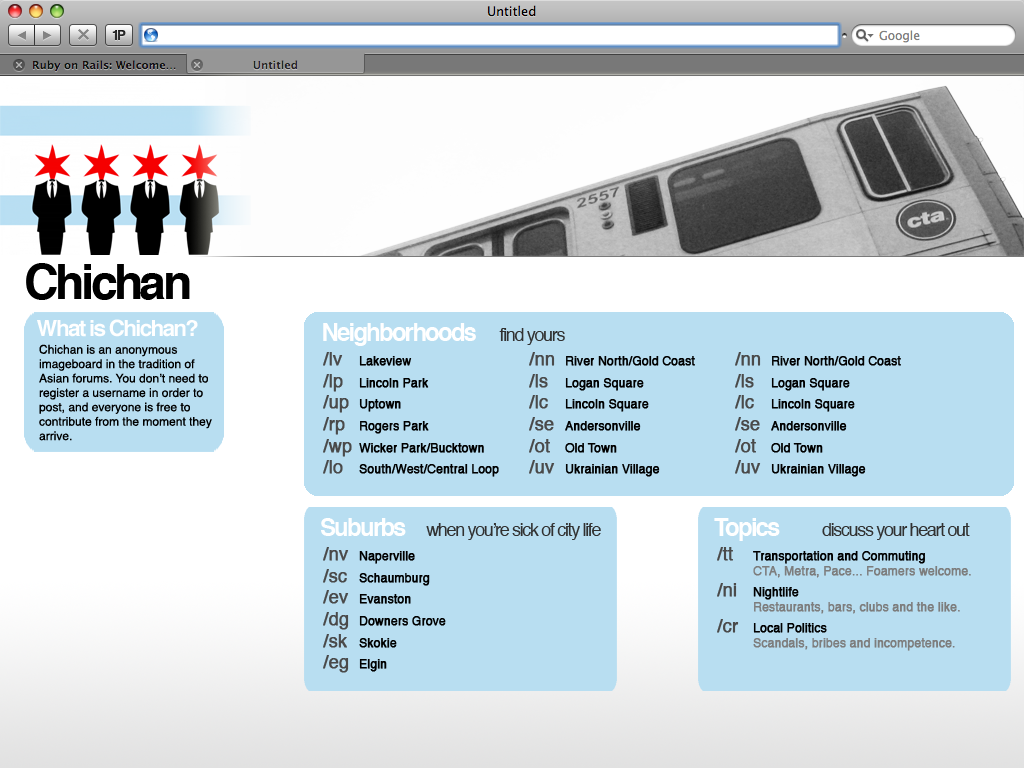
<style>
.page{position:relative;width:1024px;height:768px;background:#b8def1}
.page>*{position:absolute;margin:0}
.t1{font:48px "Helvetica-Bold";letter-spacing:-0.075em;color:#000000}
.t2{font:22.3px "Helvetica-Bold";letter-spacing:-0.075em;color:#ffffff}
.t3{font:24px "Helvetica-Bold";letter-spacing:-0.075em;color:#ffffff}
.t4{font:18px "Helvetica";letter-spacing:-0.075em;color:#313131}
.t5{font:12px "Helvetica";color:#000000}
.t6{font:12px "Helvetica";letter-spacing:-0.005em;color:#000000;font-weight:bold}
.t7{font:18px "Helvetica";letter-spacing:-0.005em;color:#4a4a4a;font-weight:bold}
.t8{font:12px "Helvetica";letter-spacing:-0.005em;color:#7d7d7d;font-weight:bold}
</style>
<div class="page">
<p class="t1" style="left:26px;top:263px;width:164px;height:37px">Chichan</p>
<p class="t2" style="left:37px;top:319px;width:161px;height:18px">What is Chichan?</p>
<p class="t3" style="left:323px;top:323px;width:242px;height:23px">Neighborhoods <span class="t4">find yours</span></p>
<p class="t5" style="left:39px;top:344px;width:173px;height:97px">Chichan is an anonymous imageboard in the tradition of Asian forums. You don’t need to register a username in order to post, and everyone is free to contribute from the moment they arrive.</p>
<p class="t6" style="left:323px;top:352px;width:176px;height:125px"><span class="t7">/lv </span>Lakeview<br><span class="t7">/lp </span>Lincoln Park<br><span class="t7">/up </span>Uptown<br><span class="t7">/rp </span>Rogers Park<br><span class="t7">/wp </span>Wicker Park/Bucktown<br><span class="t7">/lo </span>South/West/Central Loop</p>
<p class="t6" style="left:529px;top:352px;width:166px;height:125px"><span class="t7">/nn </span>River North/Gold Coast<br><span class="t7">/ls </span>Logan Square<br><span class="t7">/lc </span>Lincoln Square<br><span class="t7">/se </span>Andersonville<br><span class="t7">/ot </span>Old Town<br><span class="t7">/uv </span>Ukrainian Village</p>
<p class="t6" style="left:735px;top:352px;width:166px;height:125px"><span class="t7">/nn </span>River North/Gold Coast<br><span class="t7">/ls </span>Logan Square<br><span class="t7">/lc </span>Lincoln Square<br><span class="t7">/se </span>Andersonville<br><span class="t7">/ot </span>Old Town<br><span class="t7">/uv </span>Ukrainian Village</p>
<p class="t4" style="left:321px;top:518px;width:280px;height:22px"><span class="t3">Suburbs </span>when you’re sick of city life</p>
<p class="t4" style="left:714px;top:518px;width:256px;height:23px"><span class="t3">Topics   </span>discuss your heart out</p>
<p class="t6" style="left:323px;top:547px;width:123px;height:126px"><span class="t7">/nv </span>Naperville<br><span class="t7">/sc </span>Schaumburg<br><span class="t7">/ev </span>Evanston<br><span class="t7">/dg </span>Downers Grove<br><span class="t7">/sk </span>Skokie<br><span class="t7">/eg </span>Elgin</p>
<p class="t8" style="left:717px;top:547px;width:254px;height:104px"><span class="t7">/tt </span><span class="t6">Transportation and Commuting<br></span> CTA, Metra, Pace... Foamers welcome.<br><span class="t7">/ni </span><span class="t6">Nightlife<br></span> Restaurants, bars, clubs and the like.<br><span class="t7">/cr </span><span class="t6">Local Politics<br></span> Scandals, bribes and incompetence.</p>
</div>
